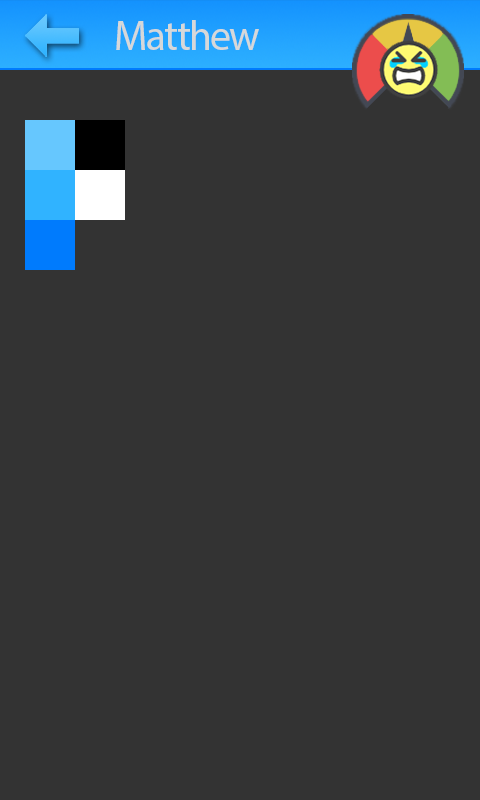
<style>
.page{position:relative;width:480px;height:800px;background:#333333}
.page>*{position:absolute;margin:0}
.t1{font:41.7px "MyriadPro-Regular";letter-spacing:-0.04em;color:#d6d8d9}
</style>
<div class="page">
<p class="t1" style="left:116px;top:20px;width:143px;height:30px">Matthew</p>
</div>
